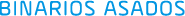
<style>
.page{position:relative;width:185px;height:16px;background:#ffffff}
.page>*{position:absolute;margin:0}
.t1{font:22px "AmpleSoft";letter-spacing:0.05em;color:#0296e2;text-transform:uppercase}
</style>
<div class="page">
<p class="t1" style="left:0px;top:0px;width:185px;height:16px">Binarios Asados</p>
</div>
